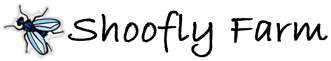
<style>
.page{position:relative;width:331px;height:61px;background:#ffffff}
.page>*{position:absolute;margin:0}
.t1{font:41.7px "BradleyHandITC";color:#010101;font-weight:bold}
</style>
<div class="page">
<p class="t1" style="left:67px;top:10px;width:261px;height:48px">Shoofly Farm</p>
</div>
